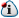
<style>
.page{position:relative;width:19px;height:18px;background:#ffffff}
.page>*{position:absolute;margin:0}
.t1{font:13.5px "TimesNewRomanPS-BoldMT";color:#1c1c1c;scale:1.22 1}
</style>
<div class="page">
<p class="t1" style="left:7px;top:4px;width:5px;height:10px">i</p>
</div>
